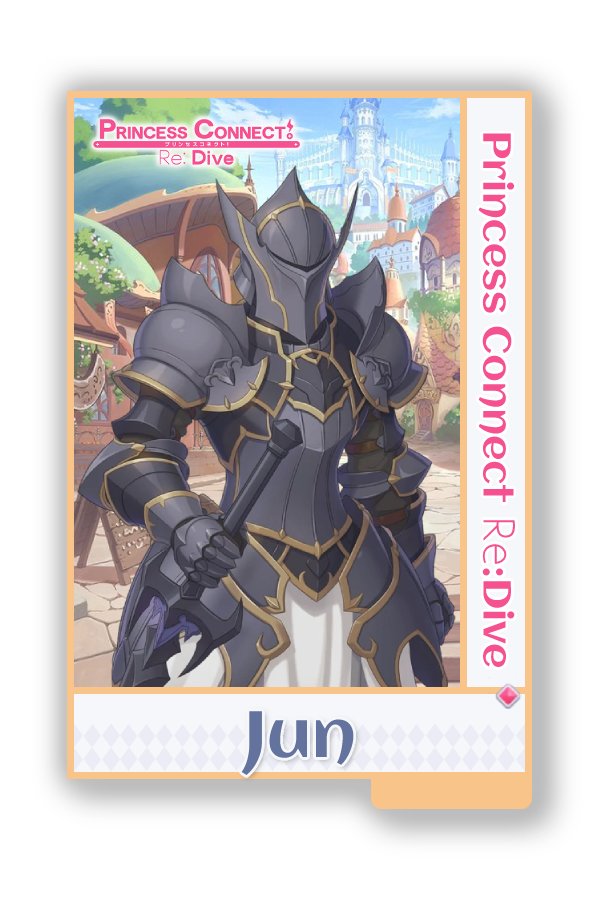
<style>
.page{position:relative;width:600px;height:900px;background:#ffffff}
.page>*{position:absolute;margin:0}
.t1{font:39px "Aclonica-Regular";color:#f55191}
.t2{font:39px "AaarghNormal";color:#f55191}
.t3{font:65px "Aclonica-Regular";color:#64739d}
</style>
<div class="page">
<p class="t1" style="left:478px;top:133px;width:38px;height:534px;rotate:90deg">Princess Connect <span class="t2">Re</span>:Dive</p>
<p class="t3" style="left:241px;top:711px;width:113px;height:64px">Jun</p>
</div>
